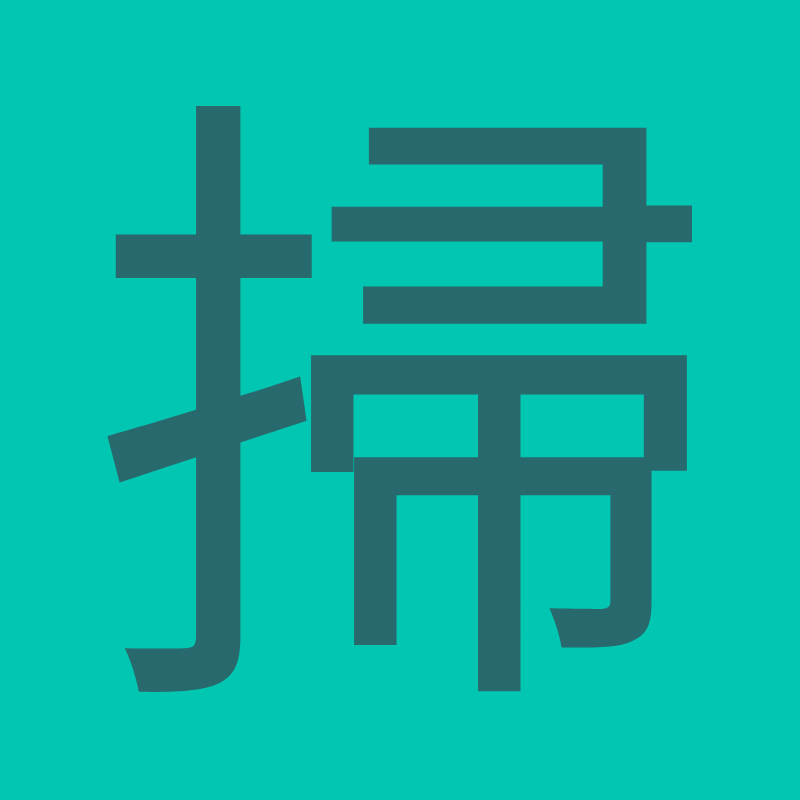
<style>
.page{position:relative;width:800px;height:800px;background:#01c6b2}
.page>*{position:absolute;margin:0}
.t1{font:642.4px "NotoSansTC-Regular";color:#28696d}
</style>
<div class="page">
<p class="t1" style="left:107px;top:105px;width:586px;height:588px">掃</p>
</div>
